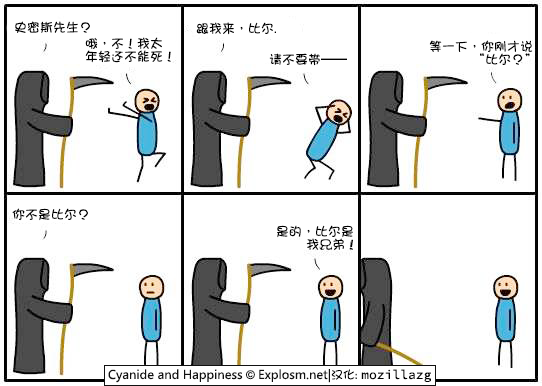
<style>
.page{position:relative;width:542px;height:386px;background:#ffffff}
.page>*{position:absolute;margin:0}
.t1{font:13px "DFGirl";color:#000000}
.t2{font:13px/13px "DFGirl";color:#000000}
</style>
<div class="page">
<p class="t1" style="left:15px;top:21px;width:75px;height:12px">史密斯先生？</p>
<p class="t1" style="left:196px;top:22px;width:80px;height:13px">跟我来，比尔.</p>
<p class="t2" style="left:85px;top:37px;width:86px;height:26px">哦，不！我太<br>年轻还不能死！</p>
<p class="t2" style="left:429px;top:40px;width:104px;height:25px">等一下，你刚才说<br>          “比尔？”</p>
<p class="t1" style="left:269px;top:53px;width:78px;height:13px">请不要带——</p>
<p class="t1" style="left:12px;top:208px;width:76px;height:13px">你不是比尔？</p>
<p class="t2" style="left:277px;top:225px;width:76px;height:25px">是的，比尔是<br>       我兄弟！</p>
</div>
